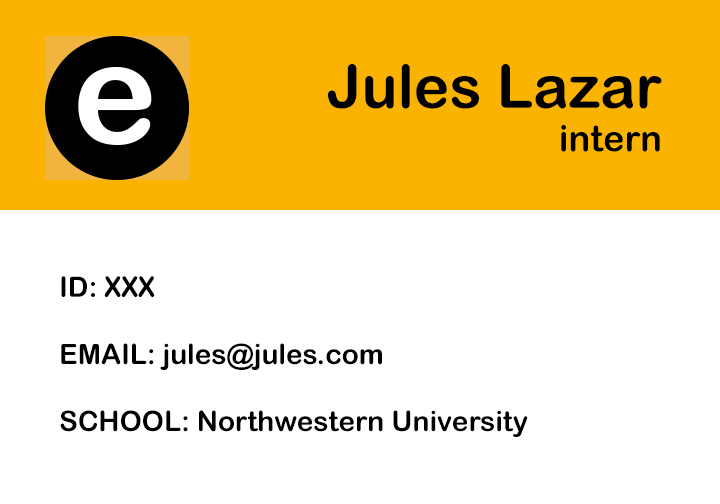
<style>
.page{position:relative;width:720px;height:504px;background:#ffffff}
.page>*{position:absolute;margin:0}
.t1{font:60px "ArialRoundedMTBold";color:#000000}
.t2{font:36px "ArialRoundedMTBold";color:#000000}
.t3{font:28px "ArialRoundedMTBold";color:#000000}
</style>
<div class="page">
<p class="t1" style="left:328px;top:64px;width:334px;height:88px;text-align:right">Jules Lazar<br><span class="t2">intern</span></p>
<p class="t3" style="left:60px;top:276px;width:468px;height:161px">ID: XXX <br><br>EMAIL: jules@jules.com<br><br>SCHOOL: Northwestern University</p>
</div>
